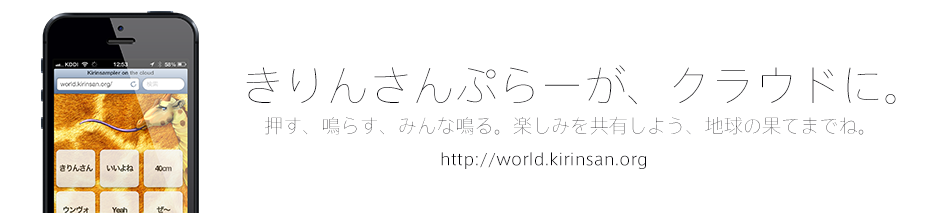
<style>
.page{position:relative;width:944px;height:213px;background:#ffffff}
.page>*{position:absolute;margin:0}
.t1{font:42.3px "AxisStd-UltraLight";letter-spacing:0.01em;color:#010005}
.t2{font:19.4px "AxisStd-UltraLight";letter-spacing:0.01em}
.t3{font:16.1px "AxisStd-Light";letter-spacing:0.01em;color:#010005}
</style>
<div class="page">
<p class="t1" style="left:246px;top:65px;width:650px;height:40px">きりんさんぷらーが、クラウドに。</p>
<p class="t2" style="left:265px;top:116px;width:599px;height:19px">押す、鳴らす、みんな鳴る。楽しみを共有しよう、地球の果てまでね。</p>
<p class="t3" style="left:441px;top:152px;width:206px;height:17px">http://world.kirinsan.org</p>
</div>
